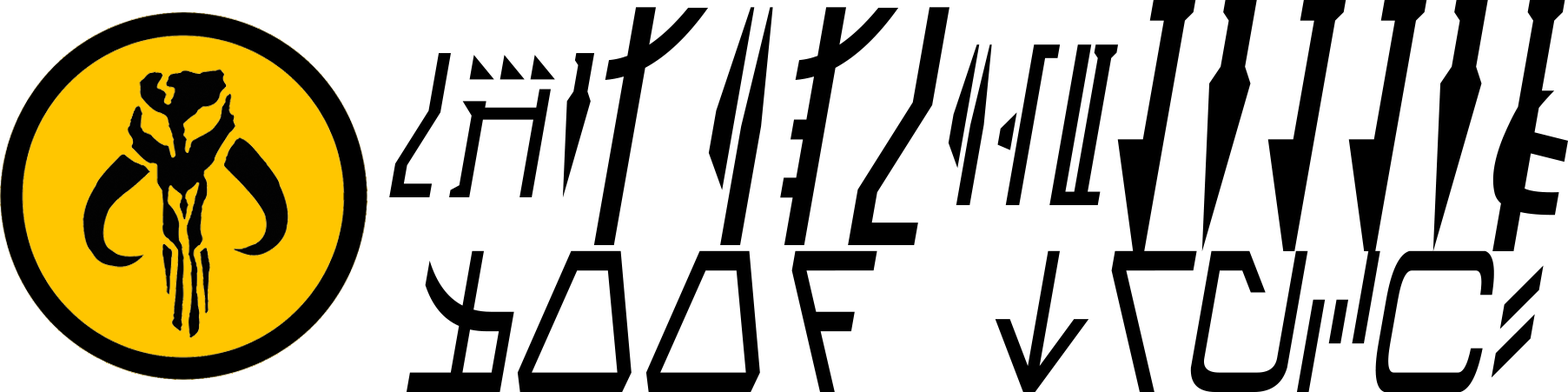
<style>
.page{position:relative;width:1568px;height:392px;background:#ffffff}
.page>*{position:absolute;margin:0}
.t1{font:279.4px "Mandalorian";color:#000000;text-transform:uppercase;font-style:italic}
.t2{font:264.1px "Mandalorian";color:#000000;text-transform:uppercase;font-style:italic}
.t3{font:160.1px "Mandalorian";color:#000000;text-transform:uppercase;font-style:italic}
.t4{font:178.2px "Mandalorian";color:#000000;text-transform:uppercase;font-style:italic}
.t5{font:198.9px "AurebeshCondensed";color:#000000;text-transform:uppercase;font-style:italic}
</style>
<div class="page">
<p class="t1" style="left:1117px;top:0px;width:451px;height:251px">Pepper</p>
<p class="t2" style="left:593px;top:7px;width:356px;height:238px">Salt</p>
<p class="t3" style="left:389px;top:53px;width:206px;height:144px">The</p>
<p class="t4" style="left:948px;top:44px;width:170px;height:161px">and</p>
<p class="t5" style="left:407px;top:250px;width:1137px;height:143px">Food Truck!</p>
</div>
